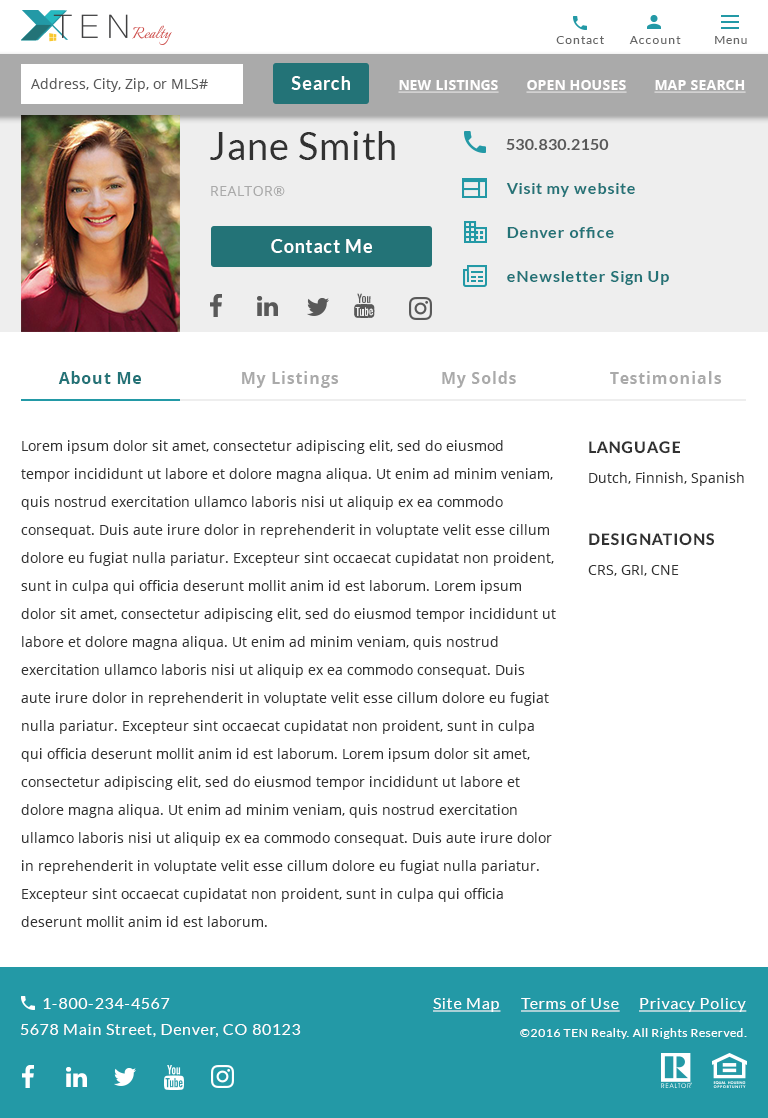
<style>
.page{position:relative;width:768px;height:1118px;background:#ffffff}
.page>*{position:absolute;margin:0}
.t1{font:12px "Lato-Regular";letter-spacing:0.075em;color:#666666}
.t2{font:14px "OpenSans";color:#595959}
.t3{font:18px "Lato-Bold";letter-spacing:0.05em;color:#ffffff}
.t4{font:14px "OpenSans-Bold";color:#fffefe;text-transform:uppercase;text-decoration:underline}
.t5{font:38px "Lato-Regular";letter-spacing:0.025em;color:#323232}
.t6{font:16px "Lato-Bold";letter-spacing:0.025em;color:#595959}
.t7{font:16px "Lato-Bold";letter-spacing:0.05em;color:#237377}
.t8{font:14px "OpenSans";letter-spacing:0.025em;color:#aaaaaa}
.t9{font:16px "OpenSans-Bold";letter-spacing:0.05em;color:#237377}
.t10{font:16px "OpenSans-Bold";letter-spacing:0.05em;color:#aaaaaa}
.t11{font:14px/28px "OpenSans";color:#323232}
.t12{font:16px "Lato-Heavy";letter-spacing:0.05em;color:#323232;text-transform:uppercase}
.t13{font:14px "OpenSans";color:#323232}
.t14{font:16px "Lato-Regular";letter-spacing:0.05em;color:#ffffff}
.t15{font:16px "Lato-Regular";letter-spacing:0.05em;color:#ffffff;text-decoration:underline}
.t16{font:16px "Lato-Regular";letter-spacing:0.05em;color:#fffefe}
.t17{font:12px "Lato-Regular";letter-spacing:0.05em;color:#ffffff}
</style>
<div class="page">
<p class="t1" style="left:556px;top:36px;width:48px;height:8px">Contact</p>
<p class="t1" style="left:629px;top:36px;width:52px;height:8px">Account</p>
<p class="t1" style="left:715px;top:36px;width:32px;height:8px">Menu</p>
<p class="t2" style="left:31px;top:78px;width:177px;height:14px">Address, City, Zip, or MLS#</p>
<p class="t3" style="left:291px;top:76px;width:59px;height:14px">Search</p>
<p class="t4" style="left:398px;top:80px;width:101px;height:13px">New Listings</p>
<p class="t4" style="left:526px;top:80px;width:101px;height:13px">Open Houses</p>
<p class="t4" style="left:654px;top:80px;width:92px;height:13px">Map Search</p>
<p class="t5" style="left:210px;top:131px;width:185px;height:29px">Jane Smith</p>
<p class="t6" style="left:506px;top:139px;width:103px;height:11px">530.830.2150</p>
<p class="t7" style="left:506px;top:183px;width:129px;height:14px">Visit my website</p>
<p class="t8" style="left:211px;top:186px;width:74px;height:10px">REALTOR®</p>
<p class="t7" style="left:507px;top:227px;width:107px;height:11px">Denver office</p>
<p class="t3" style="left:271px;top:239px;width:101px;height:14px">Contact Me</p>
<p class="t7" style="left:507px;top:271px;width:162px;height:14px">eNewsletter Sign Up</p>
<p class="t9" style="left:58px;top:371px;width:83px;height:13px">About Me</p>
<p class="t10" style="left:242px;top:371px;width:97px;height:17px">My Listings</p>
<p class="t10" style="left:442px;top:371px;width:74px;height:17px">My Solds</p>
<p class="t10" style="left:610px;top:371px;width:112px;height:13px">Testimonials</p>
<p class="t11" style="left:21px;top:440px;width:535px;height:487px">Lorem ipsum dolor sit amet, consectetur adipiscing elit, sed do eiusmod tempor incididunt ut labore et dolore magna aliqua. Ut enim ad minim veniam, quis nostrud exercitation ullamco laboris nisi ut aliquip ex ea commodo consequat. Duis aute irure dolor in reprehenderit in voluptate velit esse cillum dolore eu fugiat nulla pariatur. Excepteur sint occaecat cupidatat non proident, sunt in culpa qui officia deserunt mollit anim id est laborum. Lorem ipsum dolor sit amet, consectetur adipiscing elit, sed do eiusmod tempor incididunt ut labore et dolore magna aliqua. Ut enim ad minim veniam, quis nostrud exercitation ullamco laboris nisi ut aliquip ex ea commodo consequat. Duis aute irure dolor in reprehenderit in voluptate velit esse cillum dolore eu fugiat nulla pariatur. Excepteur sint occaecat cupidatat non proident, sunt in culpa qui officia deserunt mollit anim id est laborum. Lorem ipsum dolor sit amet, consectetur adipiscing elit, sed do eiusmod tempor incididunt ut labore et dolore magna aliqua. Ut enim ad minim veniam, quis nostrud exercitation ullamco laboris nisi ut aliquip ex ea commodo consequat. Duis aute irure dolor in reprehenderit in voluptate velit esse cillum dolore eu fugiat nulla pariatur. Excepteur sint occaecat cupidatat non proident, sunt in culpa qui officia deserunt mollit anim id est laborum.</p>
<p class="t12" style="left:589px;top:441px;width:91px;height:13px">Language</p>
<p class="t13" style="left:589px;top:472px;width:155px;height:14px">Dutch, Finnish, Spanish</p>
<p class="t12" style="left:589px;top:533px;width:125px;height:13px">Designations</p>
<p class="t13" style="left:588px;top:565px;width:91px;height:11px">CRS, GRI, CNE</p>
<p class="t14" style="left:43px;top:998px;width:127px;height:11px">1-800-234-4567</p>
<p class="t15" style="left:433px;top:998px;width:68px;height:14px">Site Map</p>
<p class="t15" style="left:521px;top:998px;width:99px;height:14px">Terms of Use</p>
<p class="t15" style="left:639px;top:998px;width:108px;height:14px">Privacy Policy</p>
<p class="t16" style="left:21px;top:1024px;width:280px;height:13px">5678 Main Street, Denver, CO 80123</p>
<p class="t17" style="left:520px;top:1028px;width:227px;height:11px">©2016 TEN Realty. All Rights Reserved.</p>
</div>
